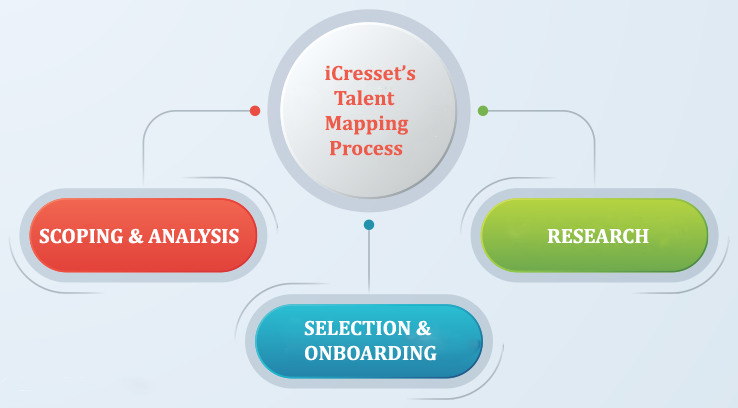
<style>
.page{position:relative;width:738px;height:408px}
.page>*{position:absolute;margin:0}
.t1{font:20.8px "Cambria-Bold";color:#ed5c4b}
.t2{font:20.8px "Cambria-Bold";color:#ffffff}
</style>
<div class="page">
<p class="t1" style="left:325px;top:65px;width:91px;height:91px">iCresset’s <br>   Talent <br> Mapping <br>  Process</p>
<p class="t2" style="left:39px;top:228px;width:200px;height:16px">SCOPING &amp; ANALYSIS</p>
<p class="t2" style="left:547px;top:228px;width:102px;height:16px">RESEARCH</p>
</div>
